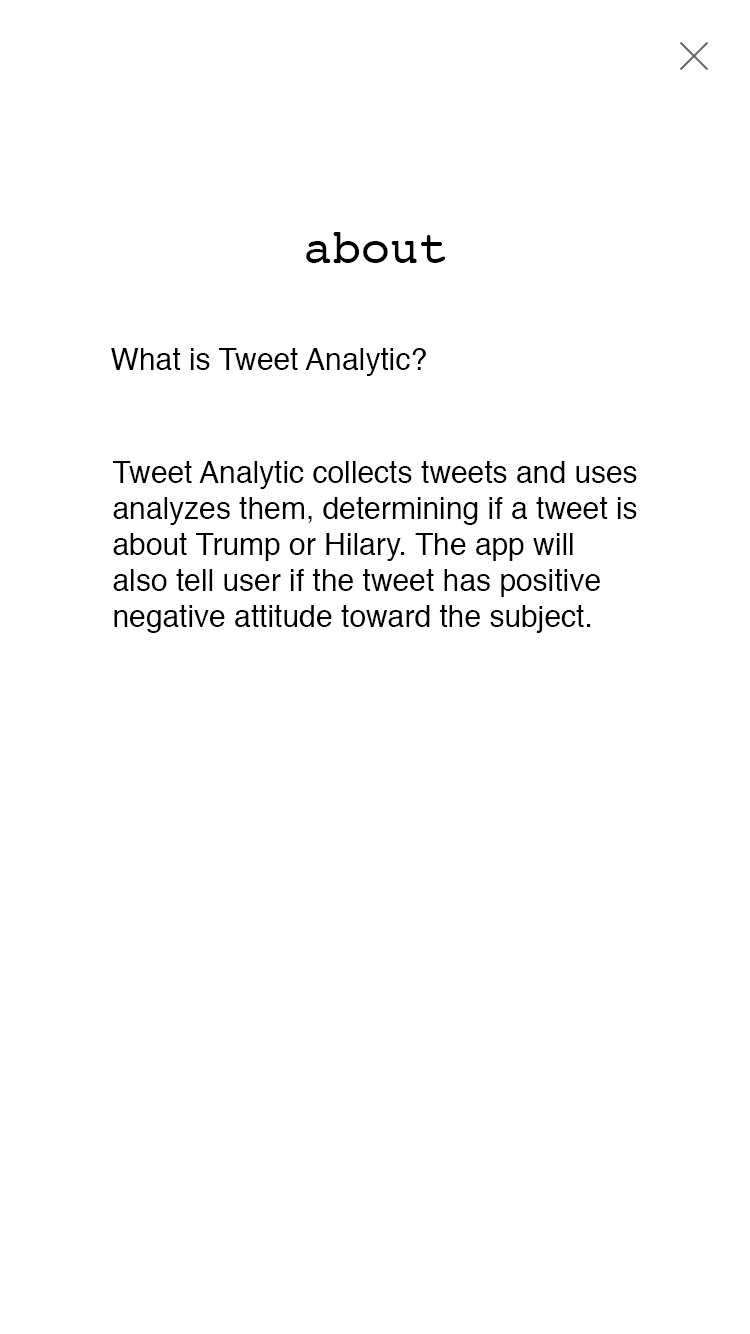
<style>
.page{position:relative;width:750px;height:1334px;background:#ffffff}
.page>*{position:absolute;margin:0}
.t1{font:48px "Courier";color:#000000}
.t2{font:30px "Helvetica";color:#000000}
</style>
<div class="page">
<p class="t1" style="left:306px;top:232px;width:140px;height:31px">about</p>
<p class="t2" style="left:111px;top:348px;width:315px;height:28px">What is Tweet Analytic?</p>
<p class="t2" style="left:113px;top:461px;width:524px;height:172px">Tweet Analytic collects tweets and uses <br>analyzes them, determining if a tweet is <br>about Trump or Hilary. The app will<br>also tell user if the tweet has positive<br>negative attitude toward the subject.</p>
</div>
